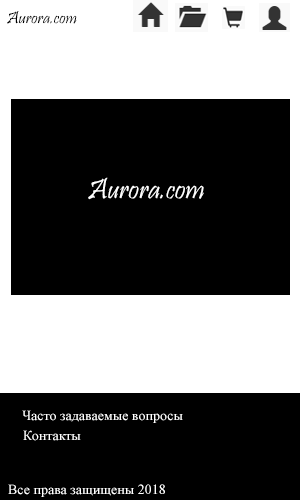
<style>
.page{position:relative;width:300px;height:500px;background:#000000}
.page>*{position:absolute;margin:0}
.t1{font:18px "Pristina-Regular";color:#000000}
.t2{font:30px "Pristina-Regular";color:#ffffff}
.t3{font:14px "TimesNewRomanPSMT";color:#ffffff}
</style>
<div class="page">
<p class="t1" style="left:7px;top:11px;width:70px;height:13px">Aurora.com</p>
<p class="t2" style="left:88px;top:177px;width:116px;height:23px">Aurora.com</p>
<p class="t3" style="left:22px;top:410px;width:161px;height:13px">Часто задаваемые вопросы</p>
<p class="t3" style="left:23px;top:430px;width:58px;height:11px">Контакты</p>
<p class="t3" style="left:8px;top:484px;width:157px;height:13px">Все права защищены 2018</p>
</div>
